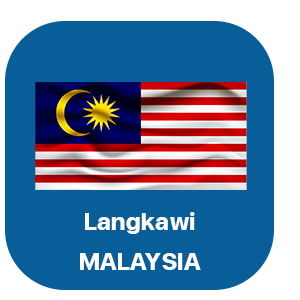
<style>
.page{position:relative;width:300px;height:300px;background:#075e99}
.page>*{position:absolute;margin:0}
.t1{font:33.3px "FCIconicBold";letter-spacing:0.01em;color:#ffffff}
</style>
<div class="page">
<p class="t1" style="left:80px;top:212px;width:121px;height:58px;text-align:center">Langkawi<br>MALAYSIA</p>
</div>
